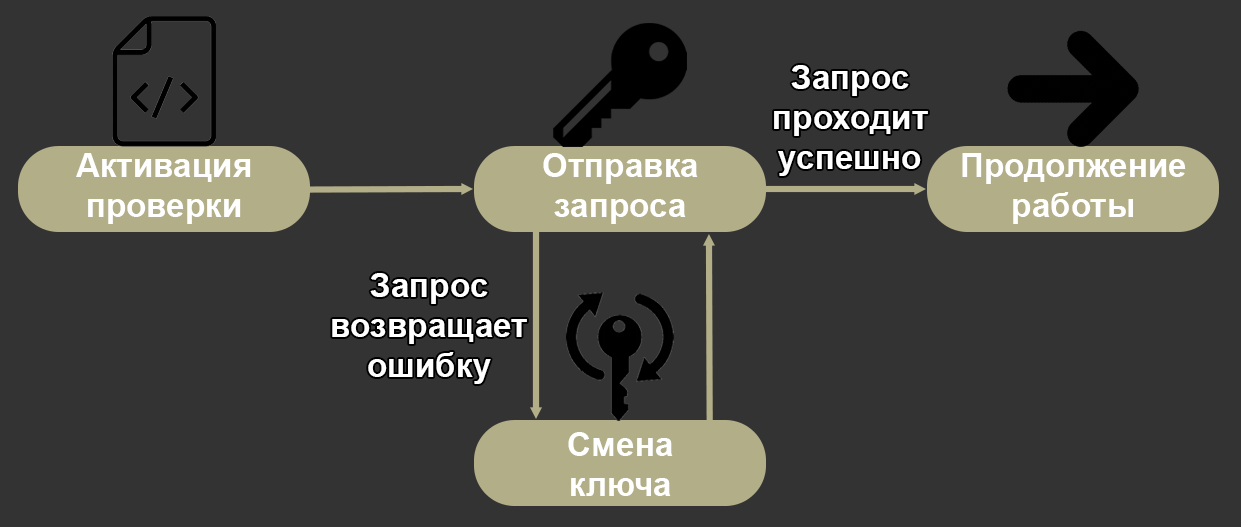
<style>
.page{position:relative;width:1241px;height:527px;background:#333333}
.page>*{position:absolute;margin:0}
.t1{font:33.3px "Arial-BoldMT";color:#ffffff}
</style>
<div class="page">
<p class="t1" style="left:774px;top:65px;width:154px;height:111px;text-align:center">Запрос проходит успешно</p>
<p class="t1" style="left:76px;top:153px;width:175px;height:71px;text-align:center">Активация<br>проверки</p>
<p class="t1" style="left:543px;top:153px;width:155px;height:71px;text-align:center">Отправка<br>запроса</p>
<p class="t1" style="left:962px;top:153px;width:224px;height:71px;text-align:center">Продолжение работы</p>
<p class="t1" style="left:332px;top:273px;width:195px;height:111px;text-align:center">Запрос возвращает ошибку</p>
<p class="t1" style="left:568px;top:432px;width:105px;height:64px;text-align:center">Смена<br>ключа</p>
</div>
